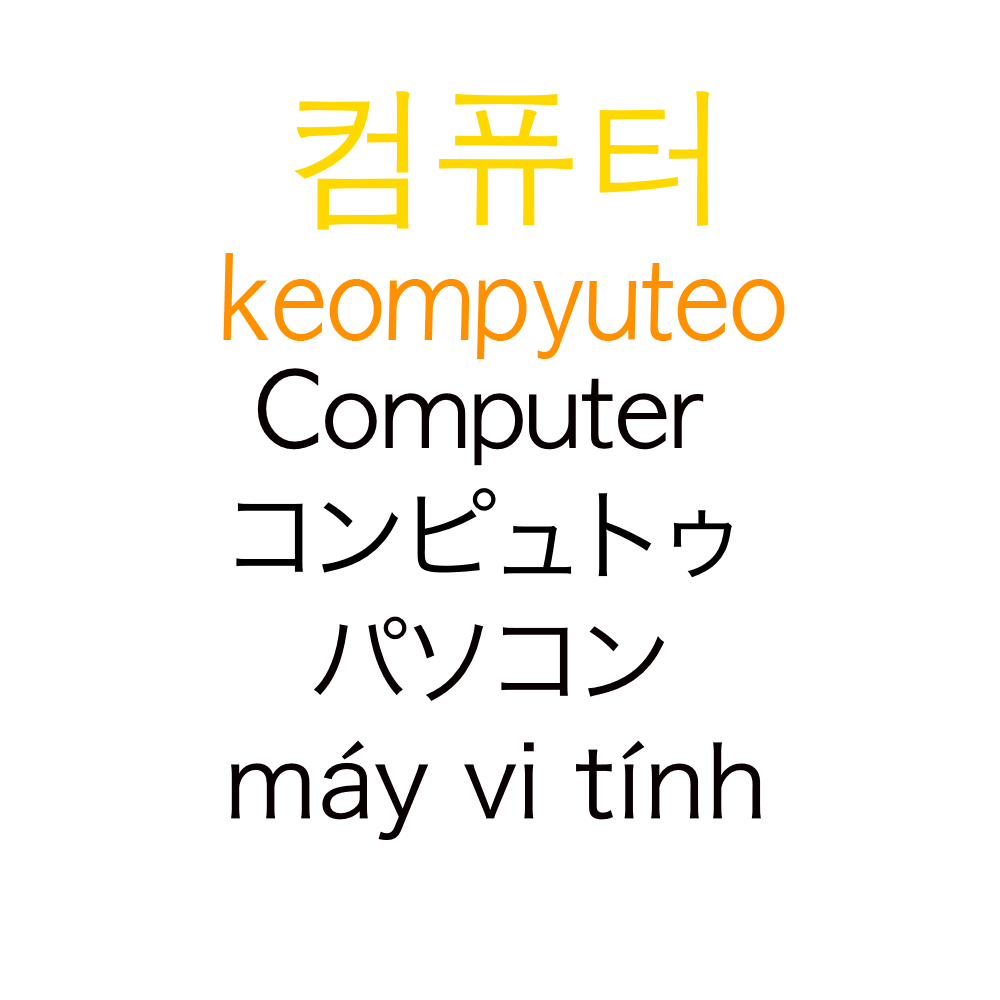
<style>
.page{position:relative;width:1000px;height:1000px;background:#ffffff}
.page>*{position:absolute;margin:0}
.t1{font:150px "AppleGothic";color:#ffd800}
.t2{font:111.2px "AppleGothic";color:#ff9000;scale:0.9 1}
.t3{font:100px "AppleGothic";color:#080000}
.t4{font:100px "HiraKakuProN-W3";color:#000000}
.t5{font:100px "HiraKakuProN-W3";color:#080000}
</style>
<div class="page">
<p class="t1" style="left:294px;top:91px;width:415px;height:139px">컴퓨터</p>
<p class="t2" style="left:223px;top:253px;width:562px;height:106px">keompyuteo</p>
<p class="t3" style="left:257px;top:368px;width:447px;height:98px">Computer</p>
<p class="t4" style="left:236px;top:488px;width:496px;height:90px">コンピュトゥ</p>
<p class="t5" style="left:314px;top:616px;width:350px;height:85px">パソコン</p>
<p class="t5" style="left:231px;top:740px;width:530px;height:101px">máy vi tính</p>
</div>
